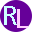
<style>
.page{position:relative;width:32px;height:32px;background:#660099}
.page>*{position:absolute;margin:0}
.t1{font:30px "Consolas";color:#ccffff}
.t2{font:30px "Consolas";color:#ffccff}
</style>
<div class="page">
<p class="t1" style="left:4px;top:6px;width:13px;height:19px">R</p>
<p class="t2" style="left:17px;top:9px;width:11px;height:19px">L</p>
</div>
